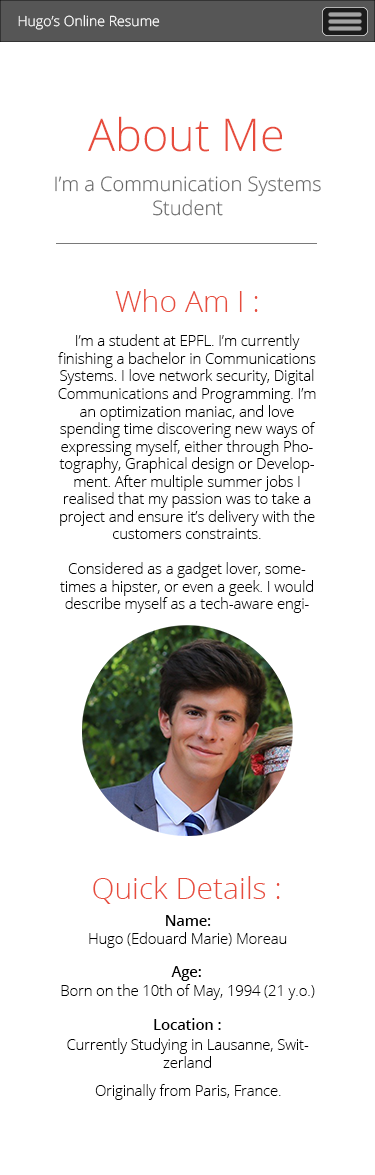
<style>
.page{position:relative;width:375px;height:1175px;background:#ffffff}
.page>*{position:absolute;margin:0}
.t1{font:14.1px "OpenSans-Light";color:#ffffff}
.t2{font:45px "OpenSans-Light";color:#e74c3c}
.t3{font:20px "OpenSans-Light";color:#636363}
.t4{font:30px "OpenSans-Light";color:#e74c3c}
.t5{font:14.6px "OpenSans-Light";color:#000000}
.t6{font:14.6px "OpenSans-Semibold";color:#000000}
</style>
<div class="page">
<p class="t1" style="left:18px;top:15px;width:142px;height:15px">Hugo’s Online Resume</p>
<p class="t2" style="left:88px;top:116px;width:194px;height:36px">About Me</p>
<p class="t3" style="left:55px;top:176px;width:266px;height:40px;text-align:center">I’m a Communication Systems <br>Student</p>
<p class="t4" style="left:115px;top:289px;width:143px;height:23px">Who Am I :</p>
<p class="t5" style="left:58px;top:334px;width:258px;height:279px;text-align:center">I’m a student at EPFL. I’m currently finishing a bachelor in Communications Systems. I love network security, Digital Communications and Programming. I’m an optimization maniac, and love spending time discovering new ways of expressing myself, either through Photography, Graphical design or Development. After multiple summer jobs I realised that my passion was to take a project and ensure it’s delivery with the customers constraints.<br><br>Considered as a gadget lover, sometimes a hipster, or even a geek. I would describe myself as a tech-aware engineer.</p>
<p class="t4" style="left:93px;top:876px;width:187px;height:28px">Quick Details :</p>
<p class="t6" style="left:166px;top:915px;width:45px;height:11px">Name:</p>
<p class="t5" style="left:89px;top:932px;width:198px;height:16px">Hugo (Edouard Marie) Moreau</p>
<p class="t6" style="left:171px;top:966px;width:30px;height:15px">Age:</p>
<p class="t5" style="left:61px;top:984px;width:254px;height:16px">Born on the 10th of May, 1994 (21 y.o.)</p>
<p class="t6" style="left:154px;top:1018px;width:67px;height:12px">Location :</p>
<p class="t5" style="left:67px;top:1038px;width:242px;height:30px;text-align:center">Currently Studying in Lausanne, Switzerland</p>
<p class="t5" style="left:95px;top:1084px;width:186px;height:16px">Originally from Paris, France.</p>
</div>
